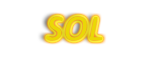
<style>
.page{position:relative;width:150px;height:60px;background:#ffffff}
.page>*{position:absolute;margin:0}
.t1{font:36px "Calibri-Italic";color:#ead706;font-weight:bold}
</style>
<div class="page">
<p class="t1" style="left:46px;top:16px;width:57px;height:25px">SOL</p>
</div>
